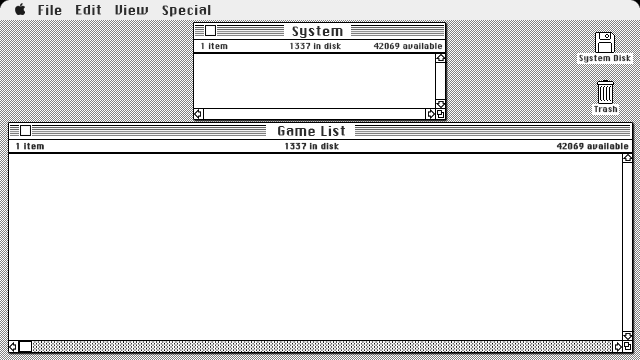
<style>
.page{position:relative;width:640px;height:360px;background:#ffffff}
.page>*{position:absolute;margin:0}
.t1{font:13px "ChicagoFLF";color:#2c2c2c}
.t2{font:8px "ChicagoFLF";color:#2c2c2c}
.t3{font:8px "ChicagoFLF";color:#2c2c2c;font-weight:bold}
</style>
<div class="page">
<p class="t1" style="left:38px;top:5px;width:173px;height:12px">File   Edit   View   Special</p>
<p class="t1" style="left:292px;top:26px;width:51px;height:12px">System</p>
<p class="t2" style="left:201px;top:42px;width:27px;height:8px">1 item</p>
<p class="t2" style="left:290px;top:42px;width:51px;height:8px">1337 in disk</p>
<p class="t2" style="left:373px;top:42px;width:70px;height:8px">42069 available</p>
<p class="t2" style="left:579px;top:54px;width:52px;height:9px">System Disk</p>
<p class="t2" style="left:594px;top:105px;width:24px;height:8px">Trash</p>
<p class="t1" style="left:278px;top:126px;width:67px;height:10px">Game List</p>
<p class="t3" style="left:16px;top:142px;width:28px;height:8px">1 item</p>
<p class="t3" style="left:285px;top:142px;width:54px;height:8px">1337 in disk</p>
<p class="t3" style="left:556px;top:142px;width:73px;height:8px">42069 available</p>
</div>
